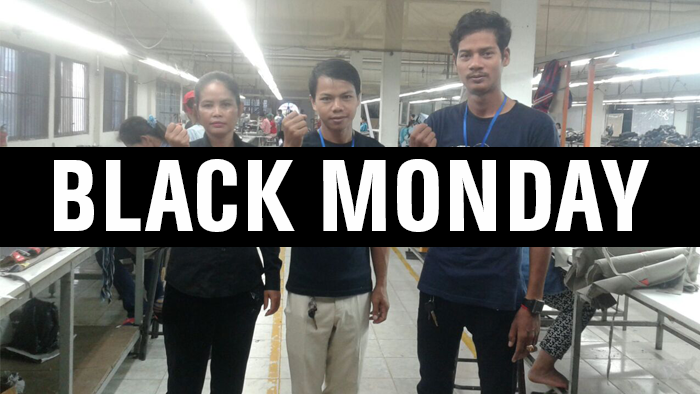
<style>
.page{position:relative;width:700px;height:394px}
.page>*{position:absolute;margin:0}
.t1{font:100px "AGBuchCondensedBQ-Medium";color:#fefefe}
</style>
<div class="page">
<p class="t1" style="left:54px;top:159px;width:595px;height:73px">BLACK MONDAY</p>
</div>
